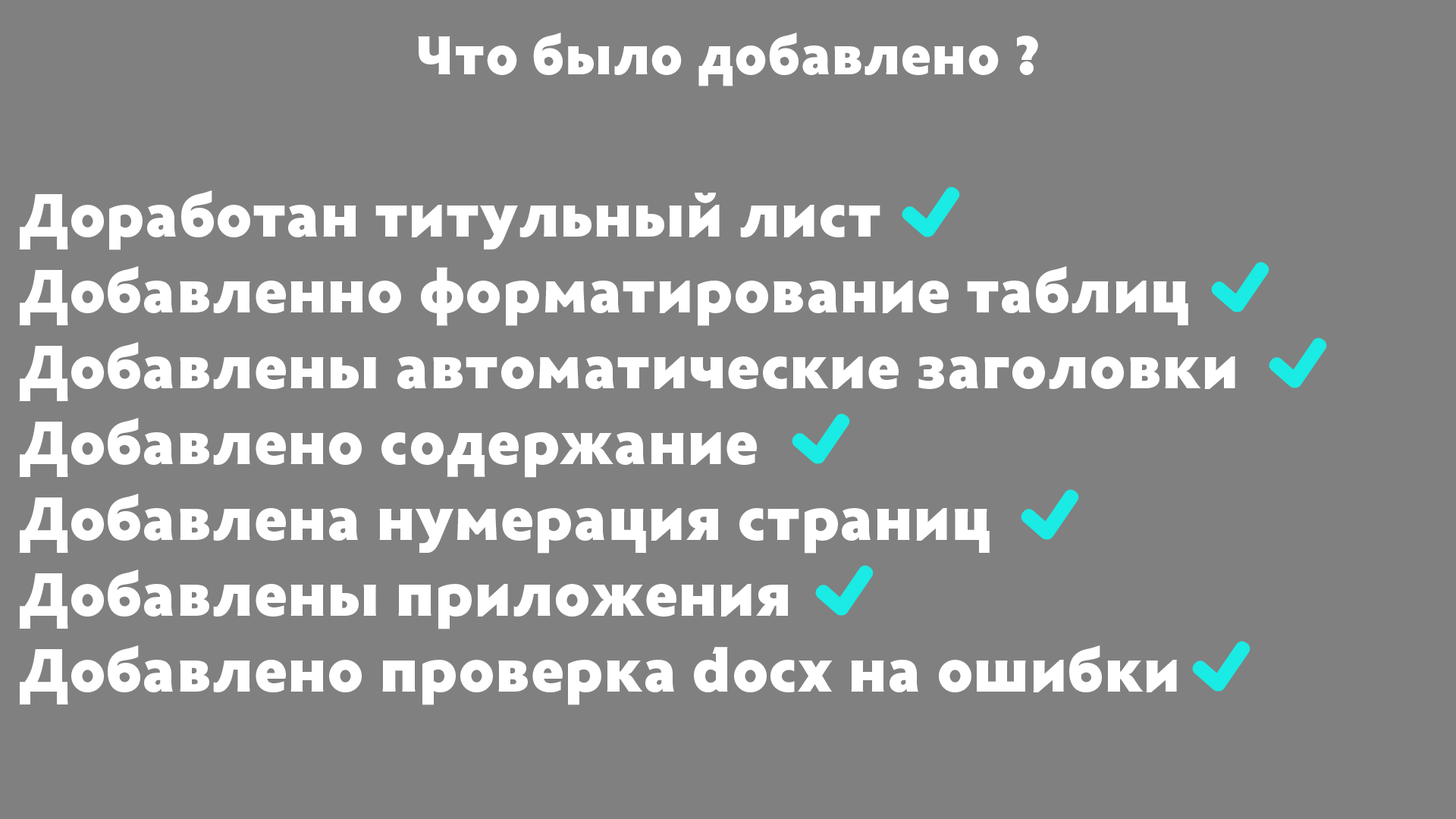
<style>
.page{position:relative;width:1456px;height:819px;background:#808080}
.page>*{position:absolute;margin:0}
.t1{font:56.9px "Radiance-Black";color:#ffffff}
.t2{font:63.2px "Radiance-Black";color:#ffffff}
</style>
<div class="page">
<p class="t1" style="left:418px;top:33px;width:620px;height:53px">Что было добавлено ?</p>
<p class="t2" style="left:19px;top:190px;width:1216px;height:515px">Доработан титульный лист<br>Добавленно форматирование таблиц<br>Добавлены автоматические заголовки<br>Добавлено содержание<br>Добавлена нумерация страниц<br>Добавлены приложения<br>Добавлено проверка docx на ошибки</p>
</div>
